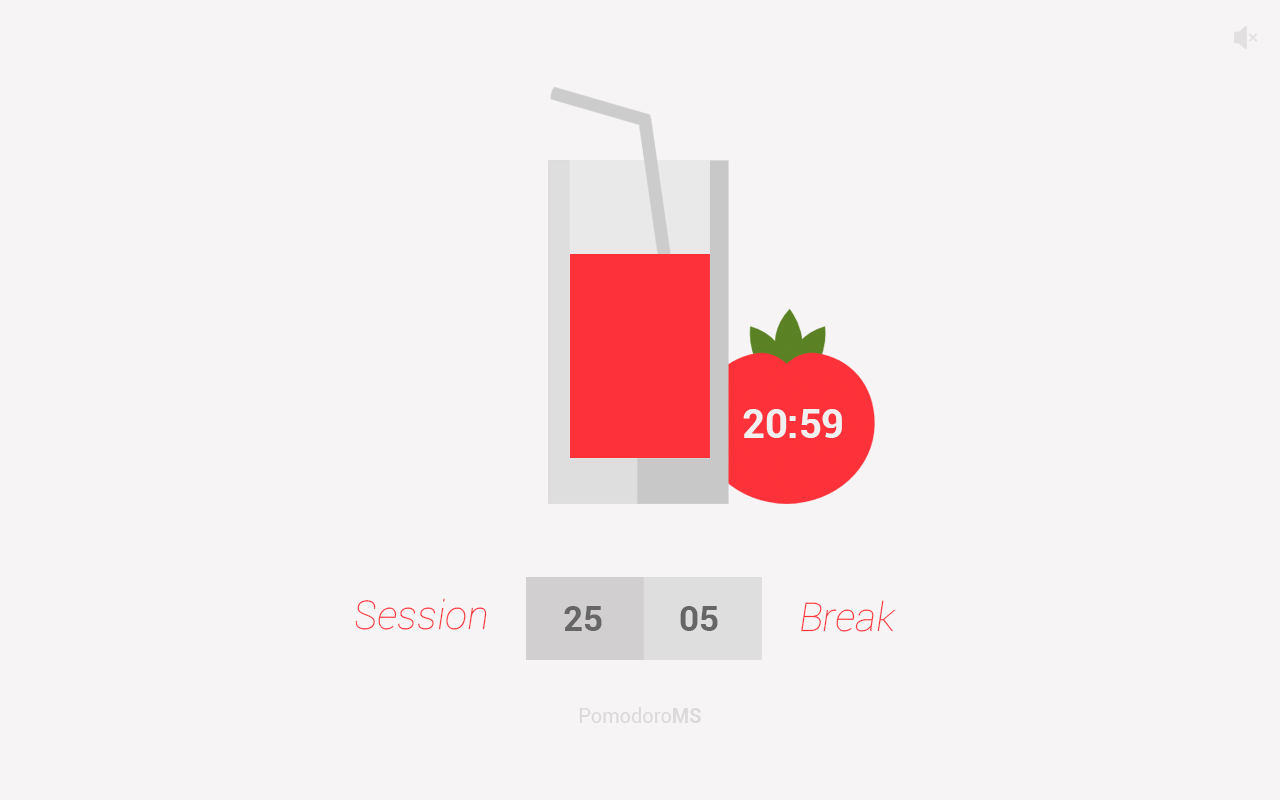
<style>
.page{position:relative;width:1280px;height:800px;background:#f6f4f4}
.page>*{position:absolute;margin:0}
.t1{font:39.7px "Roboto-Bold";color:#e9e9e9}
.t2{font:39.7px "Roboto-ThinItalic";color:#fc3139}
.t3{font:35px "Roboto-Bold";color:#666666}
.t4{font:20px "Roboto-Regular";color:#e9e9e9}
.t5{font:20px "Roboto-Bold";color:#e9e9e9}
</style>
<div class="page">
<p class="t1" style="left:743px;top:409px;width:99px;height:29px">20:59</p>
<p class="t2" style="left:355px;top:598px;width:132px;height:32px">Session</p>
<p class="t3" style="left:564px;top:606px;width:38px;height:25px">25</p>
<p class="t3" style="left:680px;top:606px;width:38px;height:25px">05</p>
<p class="t2" style="left:801px;top:600px;width:95px;height:32px">Break</p>
<p class="t4" style="left:579px;top:707px;width:122px;height:16px;opacity:0.18">Pomodoro<span class="t5">MS</span></p>
</div>
